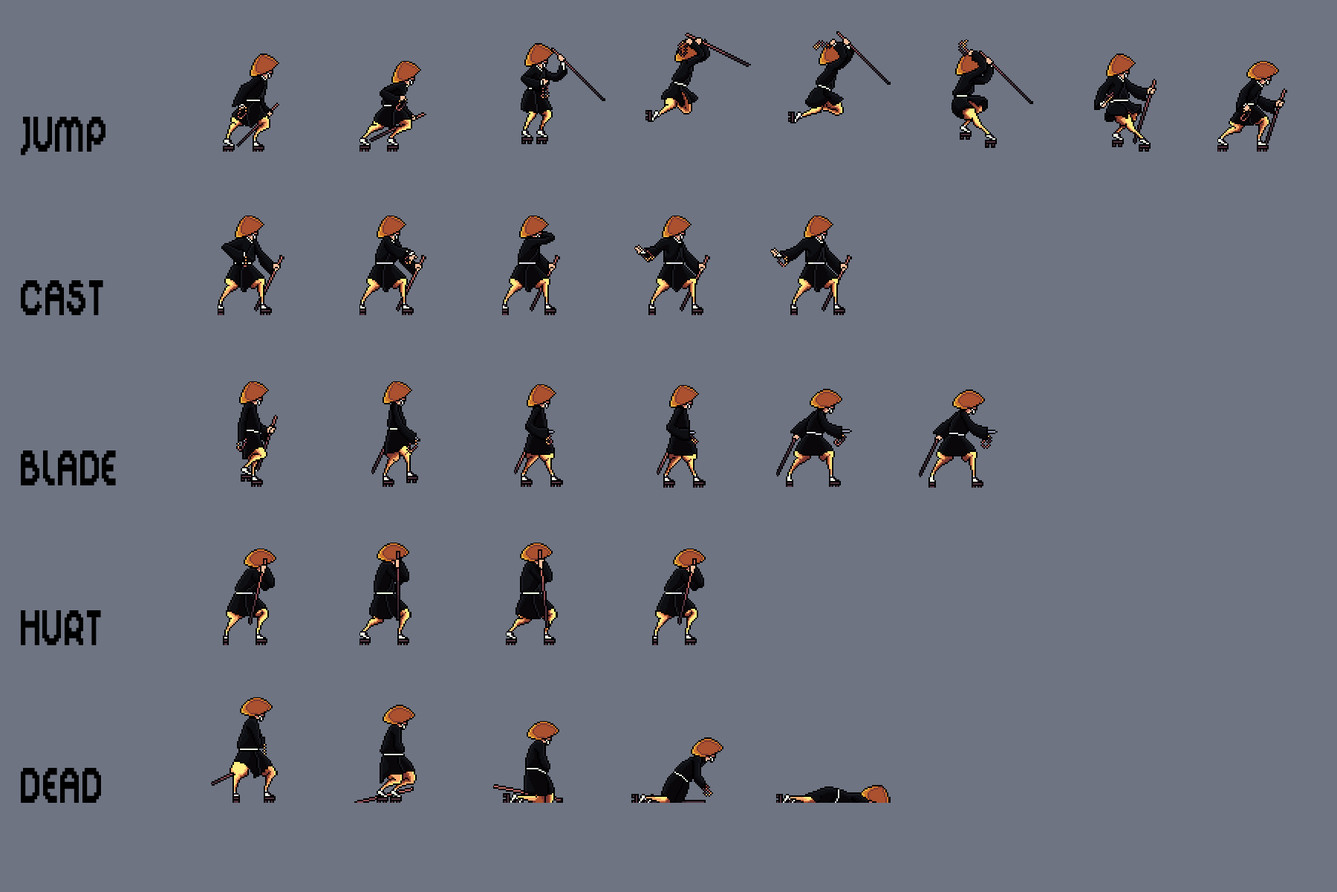
<style>
.page{position:relative;width:1337px;height:892px;background:#6e7482}
.page>*{position:absolute;margin:0}
.t1{font:55.7px "DigitalDisco";letter-spacing:0.03em;color:#000000;scale:0.67 1}
</style>
<div class="page">
<p class="t1" style="left:21px;top:117px;width:85px;height:38px">JUMP</p>
<p class="t1" style="left:21px;top:280px;width:82px;height:35px">CAST</p>
<p class="t1" style="left:21px;top:450px;width:95px;height:35px">BLADE</p>
<p class="t1" style="left:21px;top:610px;width:80px;height:35px">HURT</p>
<p class="t1" style="left:21px;top:768px;width:80px;height:34px">DEAD</p>
</div>
